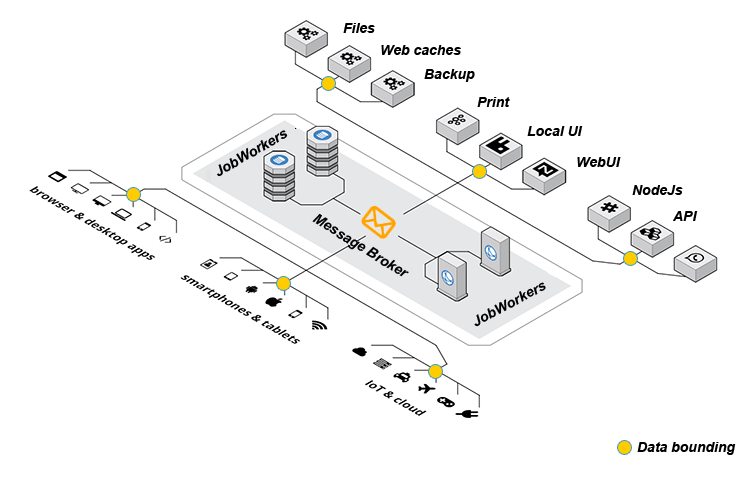
<style>
.page{position:relative;width:751px;height:494px;background:#ffffff}
.page>*{position:absolute;margin:0}
.t1{font:14px "Arial-BoldItalicMT";color:#000000}
</style>
<div class="page">
<p class="t1" style="left:343px;top:23px;width:32px;height:10px">Files</p>
<p class="t1" style="left:381px;top:45px;width:80px;height:10px">Web caches</p>
<p class="t1" style="left:424px;top:69px;width:51px;height:13px">Backup</p>
<p class="t1" style="left:477px;top:97px;width:33px;height:10px">Print</p>
<p class="t1" style="left:527px;top:126px;width:56px;height:10px">Local UI</p>
<p class="t1" style="left:217px;top:130px;width:71px;height:47px;rotate:-30deg">JobWorkers</p>
<p class="t1" style="left:577px;top:157px;width:44px;height:10px">WebUI</p>
<p class="t1" style="left:632px;top:185px;width:51px;height:10px">NodeJs</p>
<p class="t1" style="left:312px;top:213px;width:97px;height:64px;rotate:32deg">Message Broker</p>
<p class="t1" style="left:673px;top:211px;width:25px;height:10px">API</p>
<p class="t1" style="left:474px;top:282px;width:72px;height:45px;rotate:-28deg">JobWorkers</p>
<p class="t1" style="left:637px;top:442px;width:99px;height:13px">Data bounding</p>
</div>
